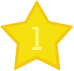
<style>
.page{position:relative;width:74px;height:71px;background:#ffffff}
.page>*{position:absolute;margin:0}
.t1{font:31.3px "Rockwell-Regular";color:#fff680}
</style>
<div class="page">
<p class="t1" style="left:32px;top:27px;width:10px;height:23px">1</p>
</div>
